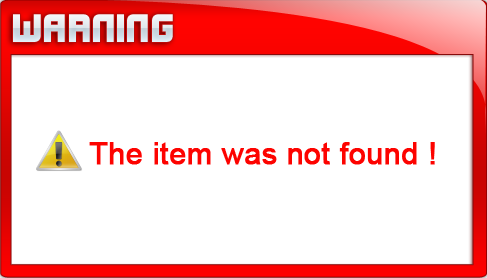
<style>
.page{position:relative;width:487px;height:278px;background:#ffffff}
.page>*{position:absolute;margin:0}
.t1{font:35.5px "Xifiction";color:#e1eaf0}
.t2{font:30px "ArialMT";color:#fd0300;font-weight:bold}
</style>
<div class="page">
<p class="t1" style="left:13px;top:14px;width:160px;height:28px">Warning</p>
<p class="t2" style="left:89px;top:142px;width:346px;height:23px">The item was not found !</p>
</div>
